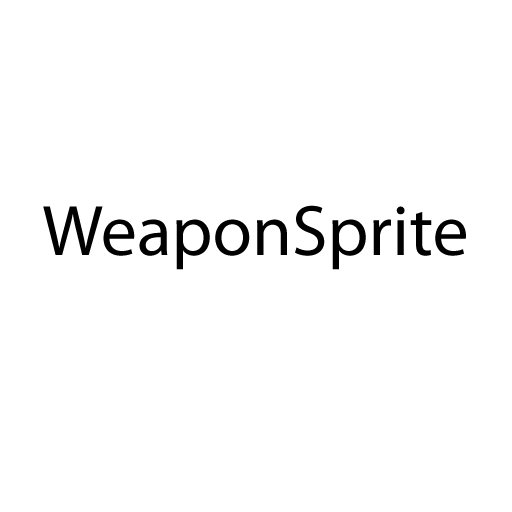
<style>
.page{position:relative;width:512px;height:512px;background:#ffffff}
.page>*{position:absolute;margin:0}
.t1{font:72px "MyriadPro-Regular";color:#000000}
</style>
<div class="page">
<p class="t1" style="left:43px;top:205px;width:423px;height:65px">WeaponSprite</p>
</div>
